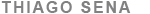
<style>
.page{position:relative;width:150px;height:14px;background:#ffffff}
.page>*{position:absolute;margin:0}
.t1{font:17.4px "Arial-BoldMT";letter-spacing:0.1em;color:#808180;scale:0.93 1}
</style>
<div class="page">
<p class="t1" style="left:1px;top:1px;width:130px;height:12px">THIAGO SENA</p>
</div>
